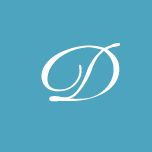
<style>
.page{position:relative;width:152px;height:152px;background:#4da4bf}
.page>*{position:absolute;margin:0}
.t1{font:83px "HenryMorganHand";color:#ffffff;scale:1.14 1}
</style>
<div class="page">
<p class="t1" style="left:41px;top:43px;width:79px;height:59px">D</p>
</div>
